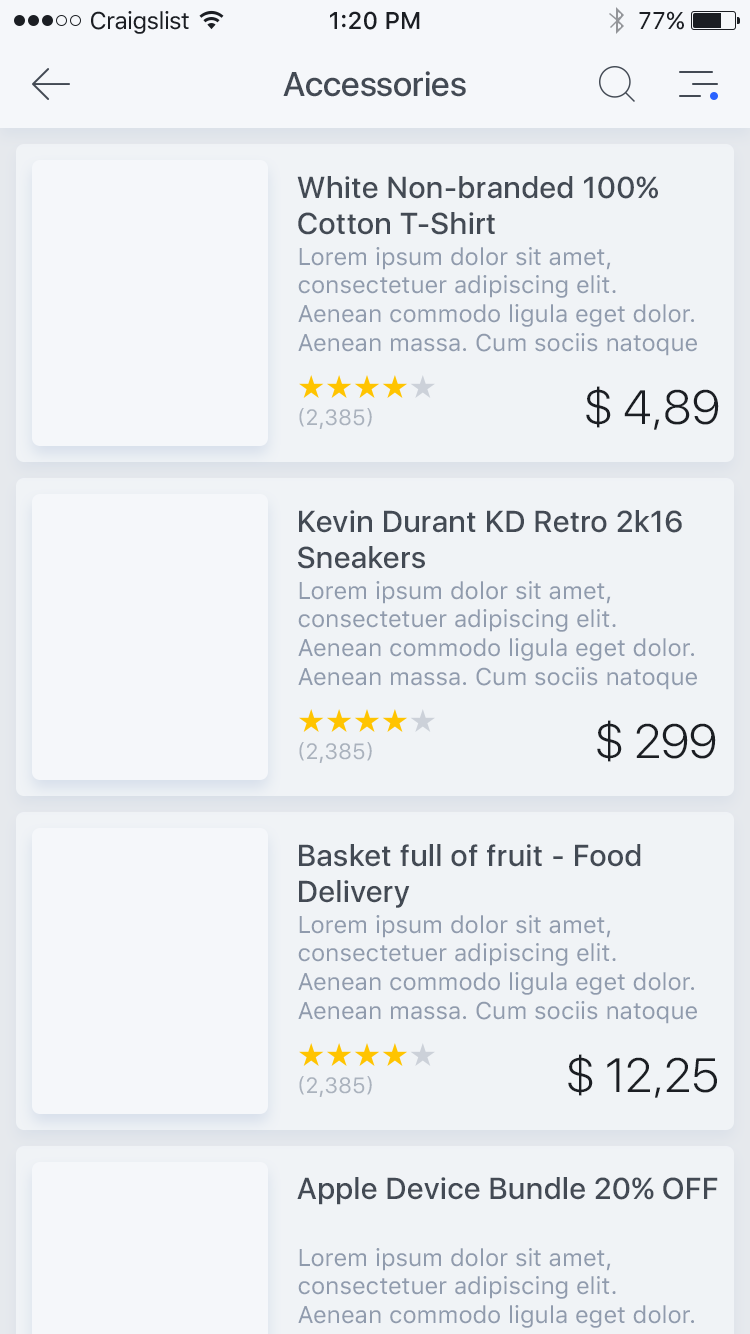
<style>
.page{position:relative;width:750px;height:1334px;background:#f0f3f6}
.page>*{position:absolute;margin:0}
.t1{font:24px "SFUIText-Regular";letter-spacing:-0.025em;color:#1b1e23}
.t2{font:24px "SFUIText-Medium";color:#1b1e23}
.t3{font:24px "SFUIText-Regular";color:#1b1e23}
.t4{font:34px "SFUIDisplay-Medium";color:#434a54}
.t5{font:30px "SFUIDisplay-Medium";letter-spacing:0.025em;color:#434a54}
.t6{font:24px "SFUIText-Regular";color:#909bad}
.t7{font:48px "SFUIDisplay-Light";color:#1b1e23}
.t8{font:22px "SFUIText-Regular";color:#aab2bd;text-transform:uppercase}
</style>
<div class="page">
<p class="t1" style="left:91px;top:11px;width:98px;height:23px">Craigslist</p>
<p class="t2" style="left:330px;top:11px;width:90px;height:19px">1:20 PM</p>
<p class="t3" style="left:639px;top:11px;width:45px;height:19px">77%</p>
<p class="t4" style="left:283px;top:71px;width:183px;height:26px">Accessories</p>
<p class="t5" style="left:297px;top:176px;width:361px;height:59px">White Non-branded 100% Cotton T-Shirt</p>
<p class="t6" style="left:298px;top:247px;width:399px;height:109px">Lorem ipsum dolor sit amet, consectetuer adipiscing elit. Aenean commodo ligula eget dolor. Aenean massa. Cum sociis natoque penatibus et magnis dis parturient montes, nascetur ridiculus mus.</p>
<p class="t7" style="left:586px;top:386px;width:133px;height:44px">$ 4,89</p>
<p class="t8" style="left:299px;top:408px;width:73px;height:21px">(2,385)</p>
<p class="t5" style="left:298px;top:510px;width:384px;height:59px">Kevin Durant KD Retro 2k16 Sneakers</p>
<p class="t6" style="left:298px;top:581px;width:399px;height:109px">Lorem ipsum dolor sit amet, consectetuer adipiscing elit. Aenean commodo ligula eget dolor. Aenean massa. Cum sociis natoque penatibus et magnis dis parturient montes, nascetur ridiculus mus.</p>
<p class="t7" style="left:597px;top:720px;width:119px;height:42px">$ 299</p>
<p class="t8" style="left:299px;top:742px;width:73px;height:21px">(2,385)</p>
<p class="t5" style="left:299px;top:844px;width:342px;height:64px">Basket full of fruit - Food Delivery</p>
<p class="t6" style="left:298px;top:915px;width:399px;height:109px">Lorem ipsum dolor sit amet, consectetuer adipiscing elit. Aenean commodo ligula eget dolor. Aenean massa. Cum sociis natoque penatibus et magnis dis parturient montes, nascetur ridiculus mus.</p>
<p class="t7" style="left:568px;top:1054px;width:149px;height:44px">$ 12,25</p>
<p class="t8" style="left:299px;top:1076px;width:73px;height:21px">(2,385)</p>
<p class="t5" style="left:297px;top:1177px;width:421px;height:28px">Apple Device Bundle 20% OFF</p>
</div>
